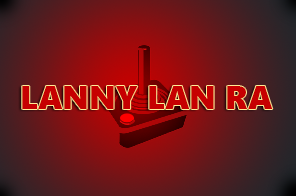
<style>
.page{position:relative;width:296px;height:196px}
.page>*{position:absolute;margin:0}
.t1{font:33px "SegoeUIBlack";color:#c60001}
</style>
<div class="page">
<p class="t1" style="left:22px;top:86px;width:251px;height:23px">LANNY LAN RA</p>
</div>
